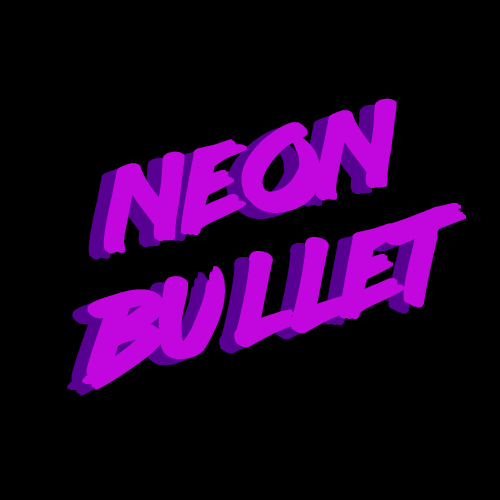
<style>
.page{position:relative;width:500px;height:500px;background:#000000}
.page>*{position:absolute;margin:0}
.t1{font:100px "lazer84";color:#c107de;font-weight:bold}
.t2{font:100px "lazer84";color:#570091;font-weight:bold}
</style>
<div class="page">
<p class="t1" style="left:82px;top:98px;width:384px;height:292px;text-align:center;rotate:-14deg">neon<br>bullet</p>
<p class="t2" style="left:67px;top:104px;width:384px;height:292px;text-align:center;rotate:-14deg">neon<br>bullet</p>
</div>
